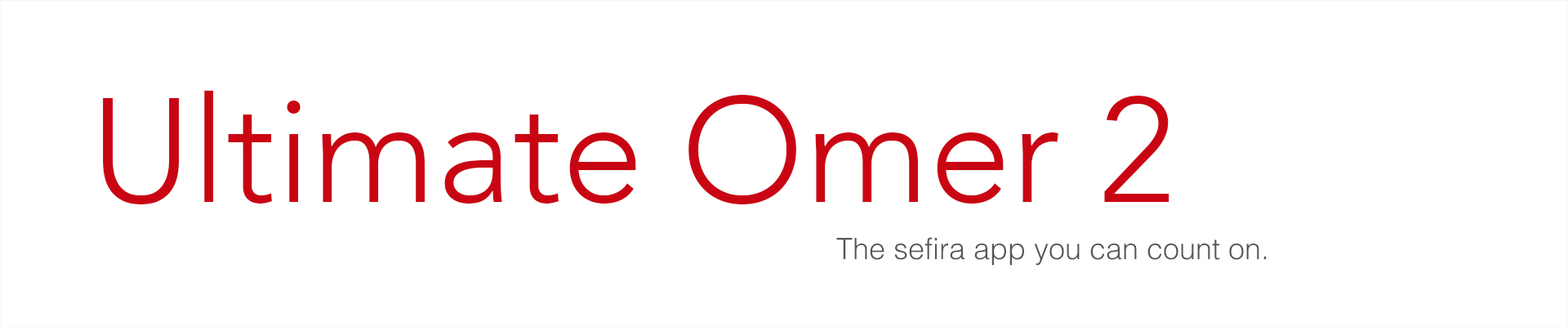
<style>
.page{position:relative;width:1568px;height:327px;background:#ffffff}
.page>*{position:absolute;margin:0}
.t1{font:147px "Avenir-Light";color:#c90513}
.t2{font:29.4px "Helvetica-Light";color:#555555}
</style>
<div class="page">
<p class="t1" style="left:103px;top:90px;width:1066px;height:114px">Ultimate Omer 2</p>
<p class="t2" style="left:836px;top:237px;width:431px;height:28px">The sefira app you can count on.</p>
</div>
